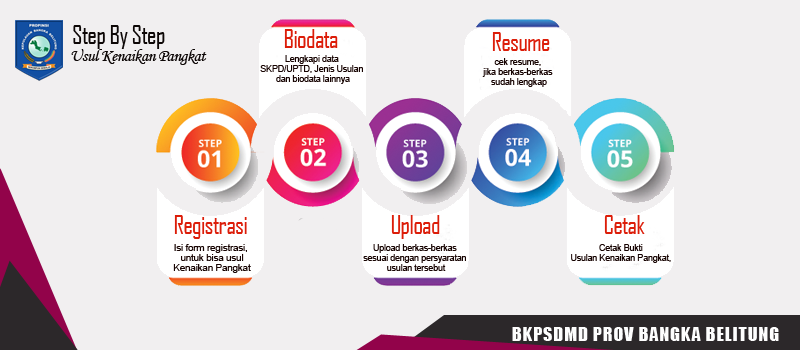
<style>
.page{position:relative;width:800px;height:350px;background:#f1eff0}
.page>*{position:absolute;margin:0}
.t1{font:25px "AgencyFB-Reg";letter-spacing:-0.025em;color:#0d0706}
.t2{font:25px "AgencyFB-Reg";letter-spacing:-0.025em;color:#dc1d09}
.t3{font:16.7px "MonotypeCorsiva";letter-spacing:-0.025em;color:#0d0706}
.t4{font:9px/10px "ArialMT";letter-spacing:-0.025em;color:#160301}
.t5{font:10px/10px "ArialMT";letter-spacing:-0.025em;color:#160301}
.t6{font:18px "Impact";letter-spacing:0.05em;color:#fefefe}
</style>
<div class="page">
<p class="t1" style="left:73px;top:25px;width:92px;height:24px">Step By Step</p>
<p class="t2" style="left:284px;top:29px;width:54px;height:19px">Biodata</p>
<p class="t2" style="left:492px;top:32px;width:58px;height:19px">Resume</p>
<p class="t3" style="left:71px;top:49px;width:136px;height:16px">Usul Kenaikan Pangkat</p>
<p class="t4" style="left:260px;top:55px;width:103px;height:29px;text-align:center">Lengkapi data <br>SKPD/UPTD, Jenis Usulan <br>dan biodata lainnya</p>
<p class="t4" style="left:482px;top:58px;width:71px;height:29px;text-align:center">cek resume, <br>jika berkas-berkas <br>sudah lengkap</p>
<p class="t2" style="left:174px;top:215px;width:73px;height:24px">Registrasi</p>
<p class="t2" style="left:391px;top:215px;width:49px;height:24px">Upload</p>
<p class="t2" style="left:604px;top:215px;width:41px;height:19px">Cetak</p>
<p class="t5" style="left:173px;top:244px;width:78px;height:29px;text-align:center">Isi form registrasi, <br>untuk bisa usul<br>Kenaikan Pangkat</p>
<p class="t4" style="left:363px;top:244px;width:103px;height:27px;text-align:center">Upload berkas-berkas <br>sesuai dengan persyaratan <br>usulan tersebut</p>
<p class="t4" style="left:571px;top:244px;width:100px;height:19px;text-align:center">Cetak Bukti <br>Usulan Kenaikan Pangkat,</p>
<p class="t6" style="left:512px;top:327px;width:267px;height:14px">BKPSDMD PROV BANGKA BELITUNG</p>
</div>
